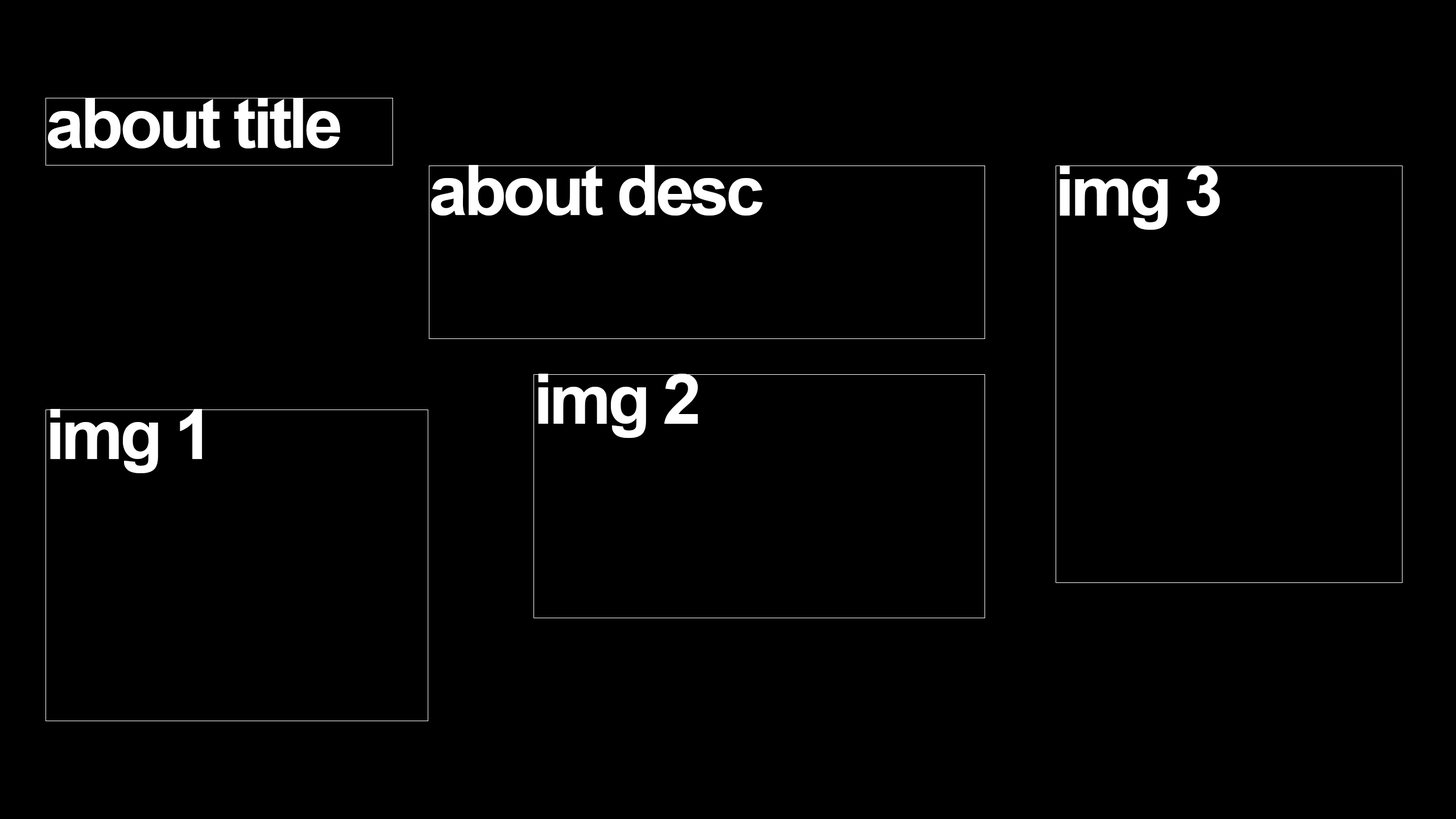
<style>
.page{position:relative;width:1456px;height:819px;background:#000000}
.page>*{position:absolute;margin:0}
.t1{font:69.5px "Arial-BoldMT";letter-spacing:-0.05em;color:#ffffff}
</style>
<div class="page">
<p class="t1" style="left:48px;top:98px;width:292px;height:50px">about title</p>
<p class="t1" style="left:431px;top:165px;width:332px;height:51px">about desc</p>
<p class="t1" style="left:1060px;top:166px;width:160px;height:64px">img 3</p>
<p class="t1" style="left:538px;top:374px;width:160px;height:64px">img 2</p>
<p class="t1" style="left:50px;top:409px;width:152px;height:64px">img 1</p>
</div>
